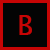
<style>
.page{position:relative;width:50px;height:50px;background:#040404}
.page>*{position:absolute;margin:0}
.t1{font:27.6px "LucidaGrande";color:#c70505}
</style>
<div class="page">
<p class="t1" style="left:19px;top:15px;width:13px;height:20px">B</p>
</div>
